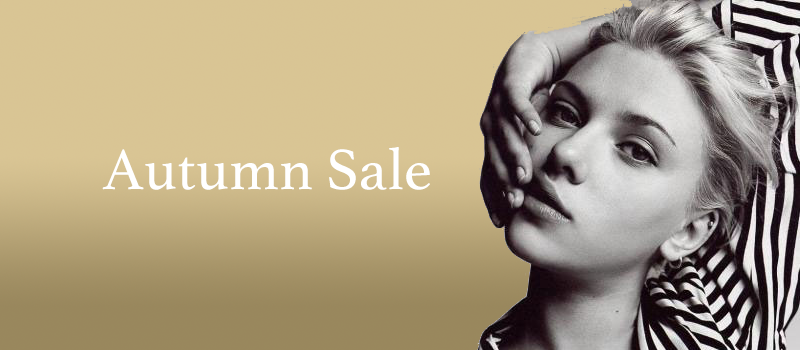
<style>
.page{position:relative;width:800px;height:350px}
.page>*{position:absolute;margin:0}
.t1{font:60px "Athelas-Regular";color:#ffffff}
</style>
<div class="page">
<p class="t1" style="left:102px;top:147px;width:328px;height:43px">Autumn Sale</p>
</div>
